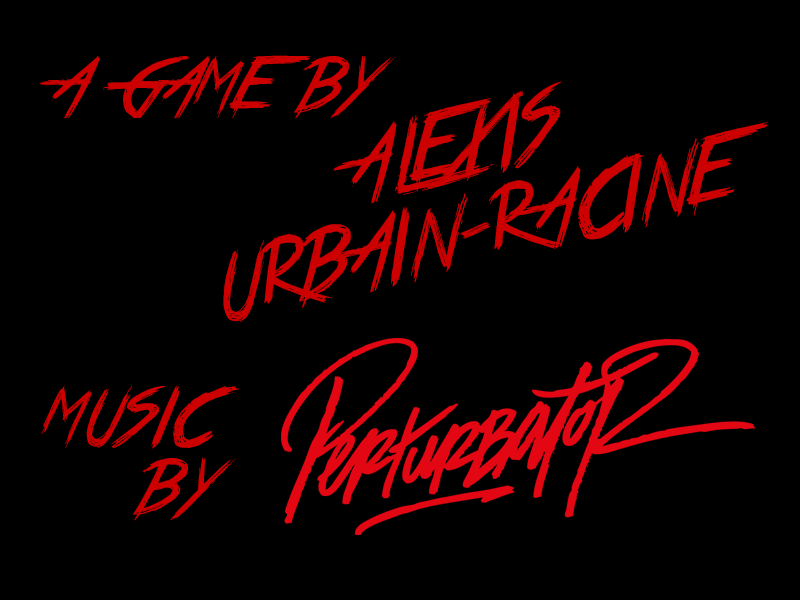
<style>
.page{position:relative;width:800px;height:600px;background:#000000}
.page>*{position:absolute;margin:0}
.t1{font:60px "TrueLies";color:#cc0000}
.t2{font:72px "TrueLies";color:#cc0000}
</style>
<div class="page">
<p class="t1" style="left:40px;top:55px;width:356px;height:64px">A GAME BY</p>
<p class="t2" style="left:223px;top:81px;width:545px;height:242px;text-align:center;rotate:-13deg">ALEXIS<br>URBAIN-RACINE</p>
<p class="t1" style="left:41px;top:385px;width:198px;height:136px;text-align:right">MUSIC BY</p>
</div>
